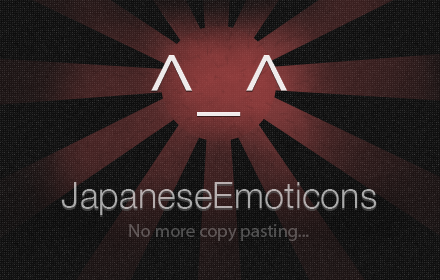
<style>
.page{position:relative;width:440px;height:280px}
.page>*{position:absolute;margin:0}
.t1{font:77.7px "MyriadPro-Regular";color:#ffffff;scale:1.11 1}
.t2{font:77.7px "MyriadPro-Regular";color:#efebeb;scale:1.11 1}
.t3{font:35.8px "HelveticaNeue-Light"}
.t4{font:35.8px "HelveticaNeue-Light";color:#adacac}
.t5{font:18.3px "MyriadPro-Regular";color:#5a5353}
</style>
<div class="page">
<p class="t1" style="left:151px;top:56px;width:137px;height:61px">^_^</p>
<p class="t2" style="left:151px;top:55px;width:137px;height:61px">^_^</p>
<p class="t3" style="left:61px;top:184px;width:316px;height:33px">JapaneseEmoticons</p>
<p class="t4" style="left:61px;top:182px;width:316px;height:33px">JapaneseEmoticons</p>
<p class="t5" style="left:129px;top:224px;width:180px;height:18px">No more copy pasting...</p>
</div>
